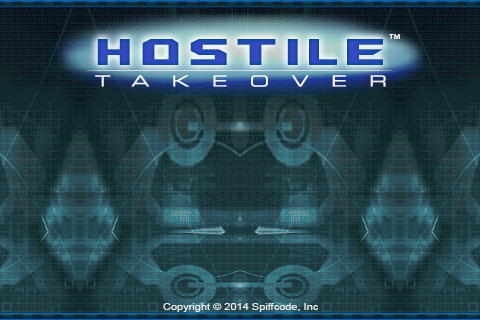
<style>
.page{position:relative;width:480px;height:320px;background:#1e3a3e}
.page>*{position:absolute;margin:0}
.t1{font:40px "Quadrangle";letter-spacing:0.19em;color:#2349b3}
.t2{font:6.8px "MyriadPro-Regular";color:#ffffff;scale:1.18 1}
.t3{font:15.3px "Eurostile-ExtendedTwo";letter-spacing:1.24em;color:#ffffff;scale:1.18 1}
.t4{font:9.3px "ArialMT";color:#ffffff;scale:1.18 1}
</style>
<div class="page">
<p class="t1" style="left:97px;top:39px;width:286px;height:26px">HOSTILE</p>
<p class="t2" style="left:389px;top:34px;width:11px;height:5px">TM</p>
<p class="t3" style="left:95px;top:75px;width:291px;height:12px;opacity:0.9">TAKEOVER</p>
<p class="t4" style="left:163px;top:303px;width:155px;height:9px;opacity:0.85">Copyright © 2014 Spiffcode, Inc</p>
</div>
